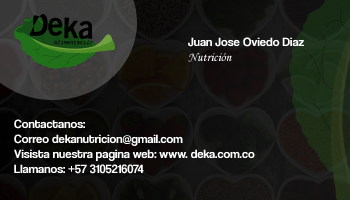
<style>
.page{position:relative;width:350px;height:200px}
.page>*{position:absolute;margin:0}
.t1{font:12.5px "CoolveticaRg-Regular";color:#ffffff}
.t2{font:12.5px "MonotypeCorsiva";color:#ffffff}
</style>
<div class="page">
<p class="t1" style="left:188px;top:37px;width:116px;height:25px">Juan Jose Oviedo Diaz<br><span class="t2">Nutrición</span></p>
<p class="t1" style="left:14px;top:119px;width:241px;height:55px">Contactanos:<br>Correo dekanutricion@gmail.com<br>Visista nuestra pagina web: www. deka.com.co<br>Llamanos: +57 3105216074</p>
</div>
